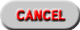
<style>
.page{position:relative;width:80px;height:30px;background:#c8c8c8}
.page>*{position:absolute;margin:0}
.t1{font:14px "GothicXB-HM"}
</style>
<div class="page">
<p class="t1" style="left:16px;top:9px;width:49px;height:12px">CANCEL</p>
</div>
